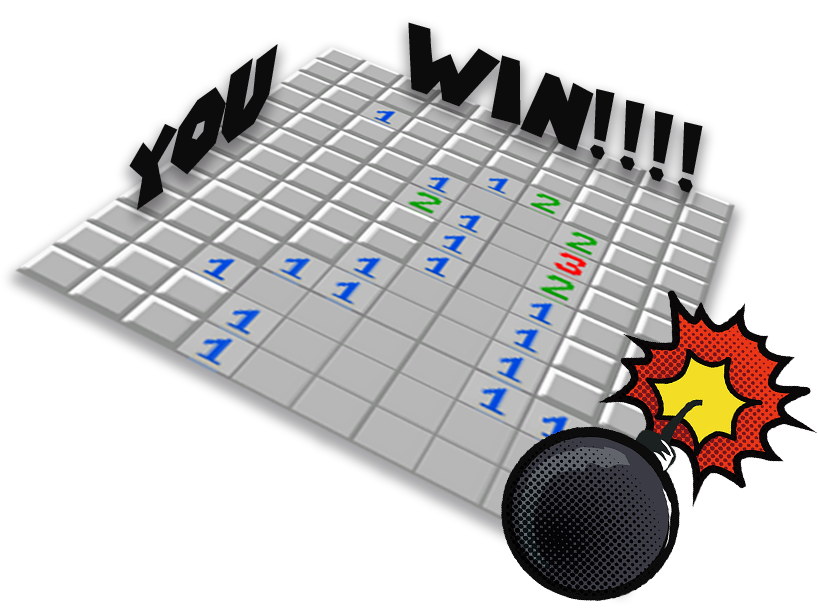
<style>
.page{position:relative;width:818px;height:610px;background:#ffffff}
.page>*{position:absolute;margin:0}
.t1{font:85.4px "SuperMarioGalaxy";color:#0d0c0c;scale:1.13 1}
.t2{font:103.4px "SuperMarioGalaxy";color:#0d0c0c;scale:0.82 1}
</style>
<div class="page">
<p class="t1" style="left:408px;top:22px;width:295px;height:171px;rotate:21deg">Win!!!!</p>
<p class="t2" style="left:129px;top:44px;width:149px;height:166px;rotate:-37deg">you</p>
</div>
